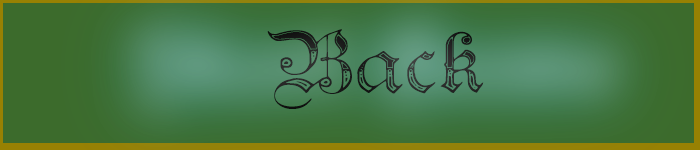
<style>
.page{position:relative;width:700px;height:150px}
.page>*{position:absolute;margin:0}
.t1{font:72px "TeutonicNo4-DemiBold";color:#252525}
</style>
<div class="page">
<p class="t1" style="left:267px;top:29px;width:217px;height:80px">Back</p>
</div>
